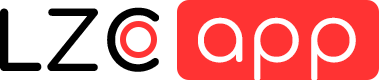
<style>
.page{position:relative;width:379px;height:80px;background:#ff3333}
.page>*{position:absolute;margin:0}
.t1{font:80px "Comfortaa-Bold";color:#000000}
.t2{font:80px "Comfortaa-Regular";color:#ffffff}
</style>
<div class="page">
<p class="t1" style="left:0px;top:7px;width:159px;height:65px">LZC</p>
<p class="t2" style="left:198px;top:17px;width:158px;height:64px">app</p>
</div>
